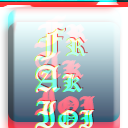
<style>
.page{position:relative;width:128px;height:128px}
.page>*{position:absolute;margin:0}
.t1{font:24px/36px "OldEnglishTextMT";font-weight:bold}
.t2{font:36px/36px "OldEnglishTextMT";font-weight:bold}
</style>
<div class="page">
<p class="t1" style="left:34px;top:13px;width:59px;height:101px"><span class="t2">F</span>R<br><span class="t2">A</span>K<br><span class="t2">I</span>OI</p>
<p class="t1" style="left:35px;top:13px;width:59px;height:101px"><span class="t2">F</span>R<br><span class="t2">A</span>K<br><span class="t2">I</span>OI</p>
</div>
